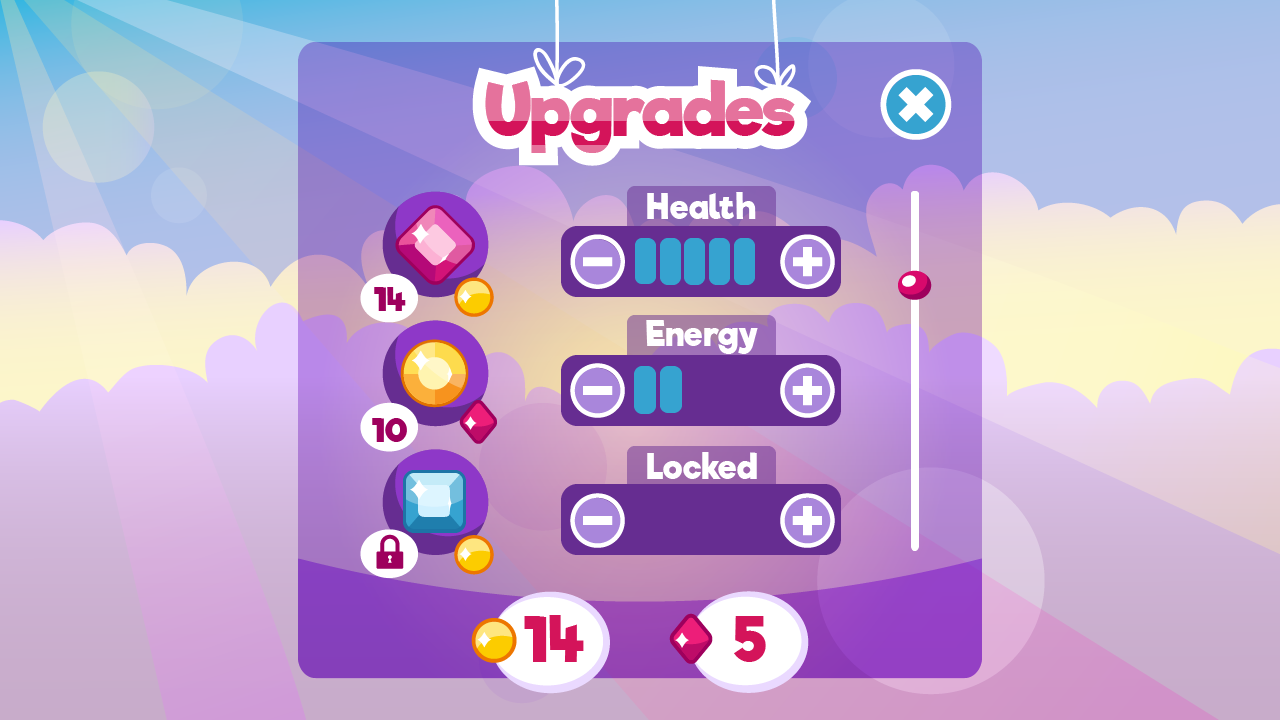
<style>
.page{position:relative;width:1280px;height:720px}
.page>*{position:absolute;margin:0}
.t1{font:70px "RifficFree-Bold"}
.t2{font:33px "RifficFree-Bold";letter-spacing:0.025em;color:#ffffff}
.t3{font:32px "RifficFree-Bold";letter-spacing:0.025em;color:#9e005d}
.t4{font:60px "RifficFree-Bold";letter-spacing:0.025em;color:#d4145a}
</style>
<div class="page">
<p class="t1" style="left:485px;top:79px;width:310px;height:74px">Upgrades</p>
<p class="t1" style="left:485px;top:79px;width:310px;height:74px">Upgrades</p>
<p class="t2" style="left:647px;top:192px;width:109px;height:27px">Health</p>
<p class="t3" style="left:374px;top:287px;width:32px;height:24px">14</p>
<p class="t2" style="left:646px;top:320px;width:112px;height:34px">Energy</p>
<p class="t3" style="left:372px;top:418px;width:35px;height:24px">10</p>
<p class="t2" style="left:647px;top:452px;width:110px;height:27px">Locked</p>
<p class="t4" style="left:524px;top:615px;width:60px;height:47px">14</p>
<p class="t4" style="left:734px;top:616px;width:32px;height:46px">5</p>
</div>
